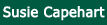
<style>
.page{position:relative;width:107px;height:25px;background:#005941}
.page>*{position:absolute;margin:0}
.t1{font:14px "Tahoma";letter-spacing:0.02em;color:#ffffff;font-weight:bold}
</style>
<div class="page">
<p class="t1" style="left:3px;top:6px;width:102px;height:15px">Susie Capehart</p>
</div>
